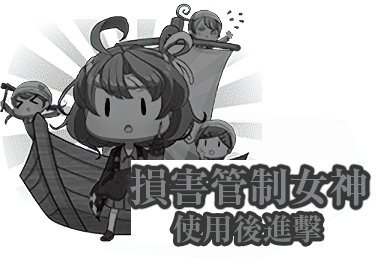
<style>
.page{position:relative;width:376px;height:265px;background:#ffffff}
.page>*{position:absolute;margin:0}
.t1{font:40px "RyuminPr6N-ExBold";color:#828585}
.t2{font:30px "RyuminPr6N-ExBold";color:#7e7f7f}
</style>
<div class="page">
<p class="t1" style="left:130px;top:168px;width:237px;height:38px">損害管制女神</p>
<p class="t2" style="left:173px;top:214px;width:148px;height:29px">使用後進擊</p>
</div>
